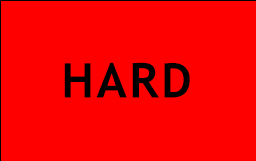
<style>
.page{position:relative;width:256px;height:161px;background:#ff0000}
.page>*{position:absolute;margin:0}
.t1{font:48px "TrebuchetMS-Bold";letter-spacing:0.05em;color:#000000}
</style>
<div class="page">
<p class="t1" style="left:64px;top:62px;width:126px;height:36px">HARD</p>
</div>
